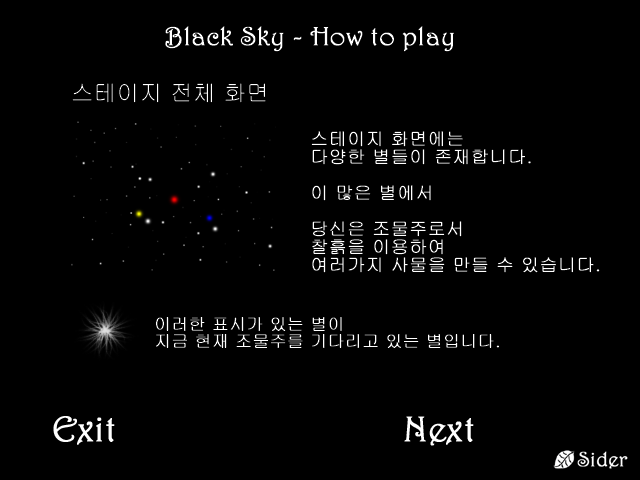
<style>
.page{position:relative;width:640px;height:480px;background:#000000}
.page>*{position:absolute;margin:0}
.t1{font:26.4px "Harrington";color:#ffffff;font-weight:bold}
.t2{font:22.9px "Gulim";color:#ffffff;font-weight:bold}
.t3{font:18px "Gulim";color:#ffffff;font-weight:bold}
.t4{font:16.8px "Gulim";color:#ffffff;font-weight:bold}
.t5{font:36px "Harrington";color:#ffffff;font-weight:bold}
</style>
<div class="page">
<p class="t1" style="left:165px;top:26px;width:289px;height:26px">Black Sky - How to play</p>
<p class="t2" style="left:72px;top:83px;width:194px;height:20px">스테이지 전체 화면</p>
<p class="t3" style="left:311px;top:131px;width:289px;height:142px">스테이지 화면에는 <br>다양한 별들이 존재합니다.<br><br>이 많은 별에서<br><br>당신은 조물주로서 <br>찰흙을 이용하여<br>여러가지 사물을 만들 수 있습니다.</p>
<p class="t4" style="left:156px;top:317px;width:343px;height:31px">이러한 표시가 있는 별이<br>지금 현재 조물주를 기다리고 있는 별입니다.</p>
<p class="t5" style="left:53px;top:416px;width:62px;height:29px">Exit</p>
<p class="t5" style="left:404px;top:416px;width:70px;height:30px">Next</p>
</div>
